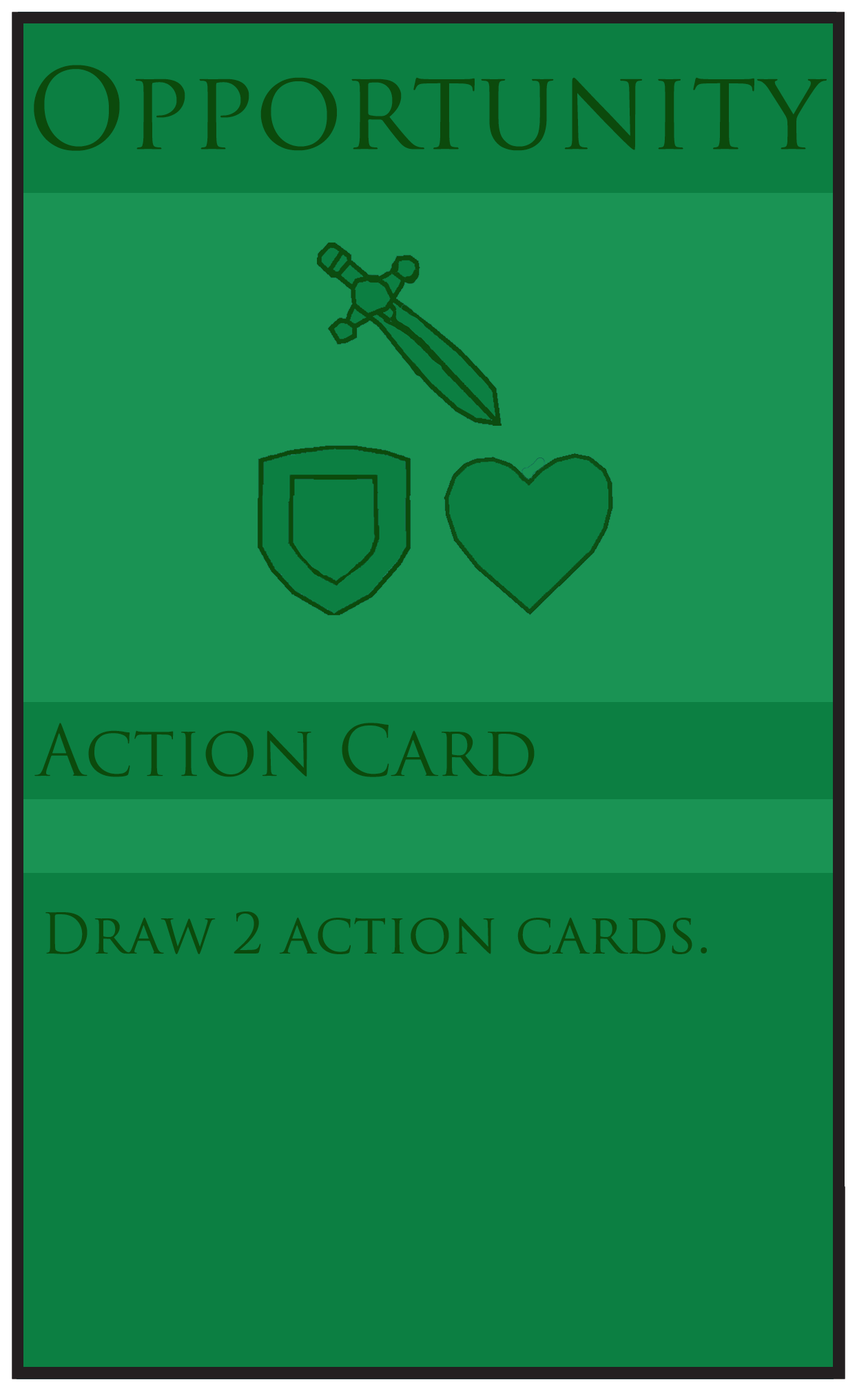
<style>
.page{position:relative;width:857px;height:1391px;background:#0c7f42}
.page>*{position:absolute;margin:0}
.t1{font:109.1px "TrajanPro-Regular";color:#0c4a0c}
.t2{font:68.9px "TrajanPro-Regular";color:#0c4a0c}
.t3{font:54.5px "TrajanPro-Regular";color:#0c4a0c}
</style>
<div class="page">
<p class="t1" style="left:34px;top:65px;width:793px;height:86px">Opportunity</p>
<p class="t2" style="left:34px;top:723px;width:501px;height:54px">Action Card</p>
<p class="t3" style="left:45px;top:912px;width:662px;height:42px">Draw 2 action cards.</p>
</div>
